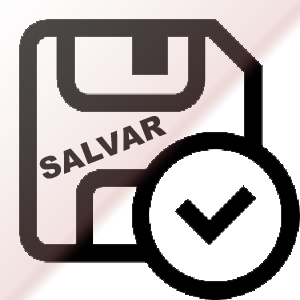
<style>
.page{position:relative;width:300px;height:300px;background:#ffffff}
.page>*{position:absolute;margin:0}
.t1{font:30px "Arial-Black";color:#423535}
</style>
<div class="page">
<p class="t1" style="left:39px;top:116px;width:128px;height:63px;rotate:-21deg">SALVAR</p>
</div>
